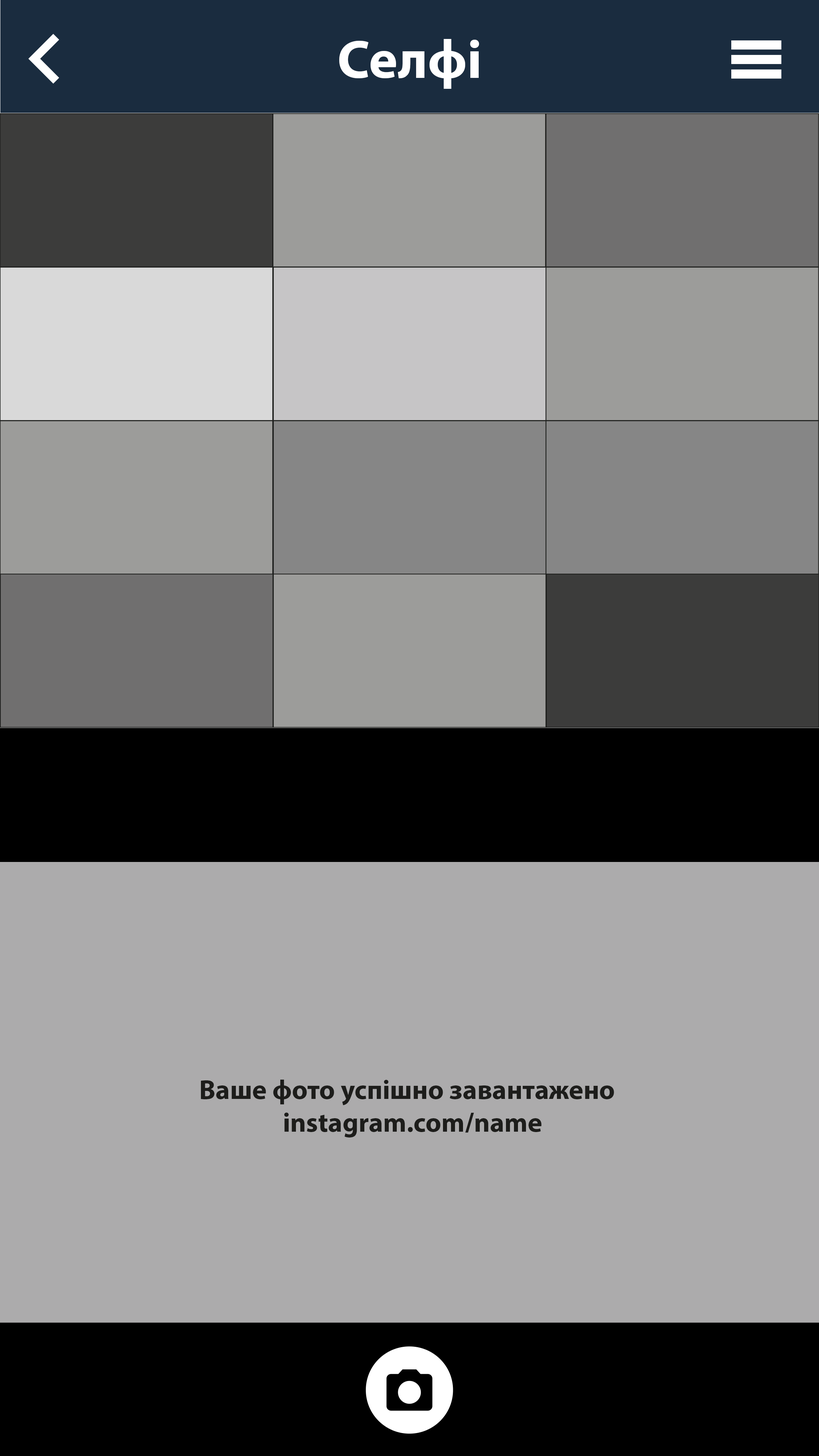
<style>
.page{position:relative;width:819px;height:1456px;background:#acabac}
.page>*{position:absolute;margin:0}
.t1{font:54.6px "MyriadPro-Bold";color:#ffffff}
.t2{font:27.3px "MyriadPro-Bold";color:#1d1d1b}
</style>
<div class="page">
<p class="t1" style="left:339px;top:39px;width:140px;height:50px">Селфі</p>
<p class="t2" style="left:201px;top:1080px;width:413px;height:57px;text-align:center">Ваше фото успішно завантажено <br> instagram.com/name</p>
</div>
